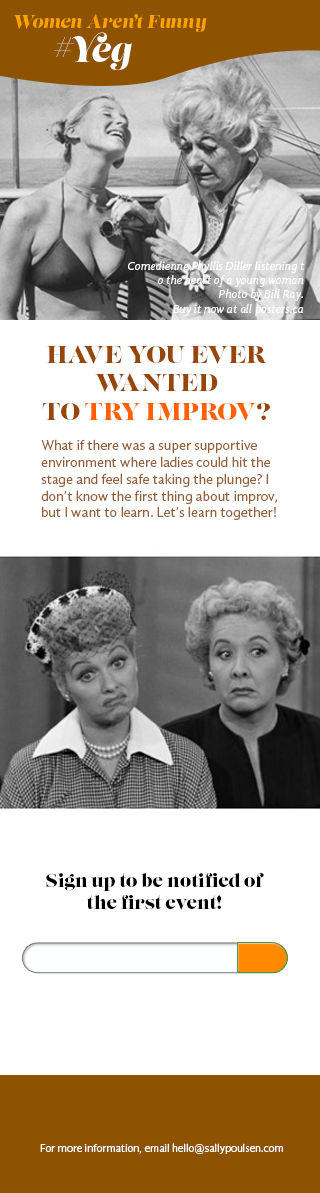
<style>
.page{position:relative;width:320px;height:1193px;background:#ffffff}
.page>*{position:absolute;margin:0}
.t1{font:18px "Lust-Italic";color:#ffa200}
.t2{font:35px "LustScript";color:#ffffff}
.t3{font:12px "GandhiSans-Italic";color:#ffffff}
.t4{font:24px "Lust-Regular";color:#96460b;text-transform:uppercase}
.t5{font:24px "Lust-Regular";color:#ff6000;text-transform:uppercase}
.t6{font:14px "GandhiSans-Regular";color:#946039}
.t7{font:18px "Lust-Regular";color:#000000}
.t8{font:11px "GandhiSans-Regular";color:#ffffff}
</style>
<div class="page">
<p class="t1" style="left:14px;top:14px;width:193px;height:18px">Women Aren’t Funny</p>
<p class="t2" style="left:54px;top:32px;width:78px;height:38px">#Yeg</p>
<p class="t3" style="left:128px;top:260px;width:177px;height:56px;text-align:right">Comedienne Phyllis Diller listening t<br>o the heart of a young woman<br>Photo by Bill Ray. <br>Buy it now at all posters.ca</p>
<p class="t4" style="left:42px;top:345px;width:228px;height:76px;text-align:center">Have you ever <br>wanted <br>to <span class="t5">try improv</span>?</p>
<p class="t6" style="left:41px;top:439px;width:236px;height:81px">What if there was a super supportive <br>environment where ladies could hit the stage and feel safe taking the plunge? I don’t know the first thing about improv, but I want to learn. Let’s learn together!</p>
<p class="t7" style="left:46px;top:873px;width:218px;height:37px;text-align:center">Sign up to be notified of the first event!</p>
<p class="t8" style="left:40px;top:1143px;width:243px;height:11px">For more information, email hello@sallypoulsen.com</p>
</div>
